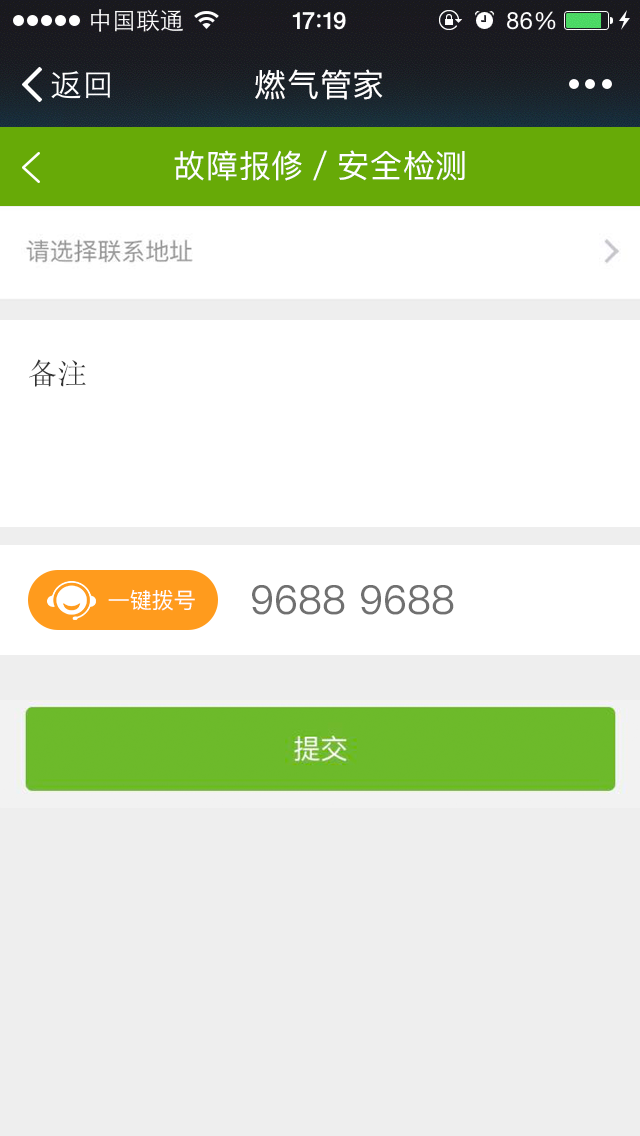
<style>
.page{position:relative;width:640px;height:1136px;background:#eeeeee}
.page>*{position:absolute;margin:0}
.t1{font:32px "PingFangSC-Regular";letter-spacing:0.025em;color:#ffffff}
.t2{font:30px "SimSun";color:#313131}
.t3{font:22px "PingFangSC-Regular";color:#ffffff}
.t4{font:40px "PingFangSC-Regular";color:#707070}
</style>
<div class="page">
<p class="t1" style="left:255px;top:69px;width:128px;height:31px">燃气管家</p>
<p class="t1" style="left:174px;top:150px;width:291px;height:31px">故障报修／安全检测</p>
<p class="t2" style="left:29px;top:359px;width:57px;height:28px">备注</p>
<p class="t3" style="left:108px;top:589px;width:87px;height:22px">一键拨号</p>
<p class="t4" style="left:252px;top:585px;width:202px;height:30px">9688 9688</p>
</div>
